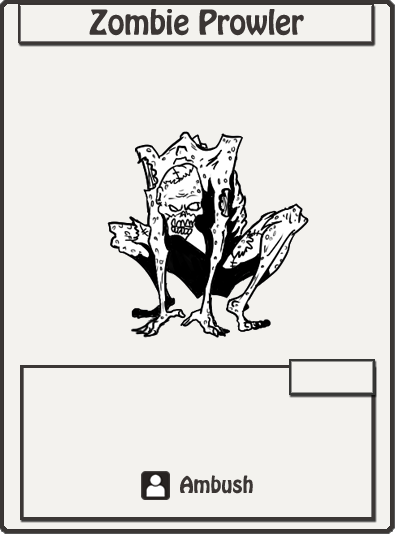
<style>
.page{position:relative;width:395px;height:534px;background:#f3f2ee}
.page>*{position:absolute;margin:0}
.t1{font:30px "HoboStd";color:#3b3634}
.t2{font:20px "HoboStd";color:#3b3634}
</style>
<div class="page">
<p class="t1" style="left:89px;top:9px;width:215px;height:27px">Zombie Prowler</p>
<p class="t2" style="left:180px;top:475px;width:73px;height:19px">Ambush</p>
</div>
